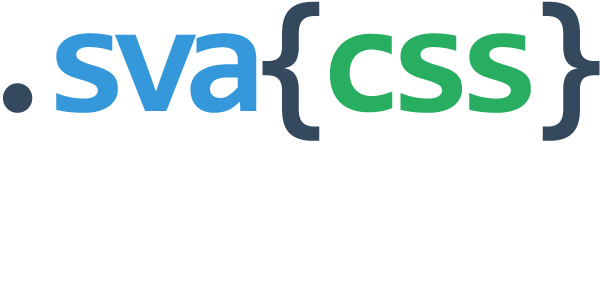
<style>
.page{position:relative;width:600px;height:300px;background:#ffffff}
.page>*{position:absolute;margin:0}
.t1{font:153px "Consolas-Bold";letter-spacing:-0.1em;color:#3498db}
.t2{font:153px "Consolas-Bold";letter-spacing:-0.1em;color:#34495e}
.t3{font:153px "Consolas-Bold";letter-spacing:-0.1em;color:#27ae60}
</style>
<div class="page">
<p class="t1" style="left:3px;top:1px;width:597px;height:140px"><span class="t2">.</span>sva<span class="t2">{</span><span class="t3">css</span><span class="t2">}</span></p>
</div>
